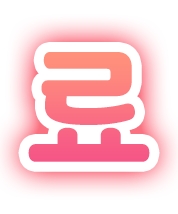
<style>
.page{position:relative;width:178px;height:214px;background:#ffffff}
.page>*{position:absolute;margin:0}
.t1{font:146.7px "Binggrae-Bold";text-transform:uppercase;scale:0.91 1}
</style>
<div class="page">
<p class="t1" style="left:28px;top:52px;width:122px;height:110px">료</p>
</div>
